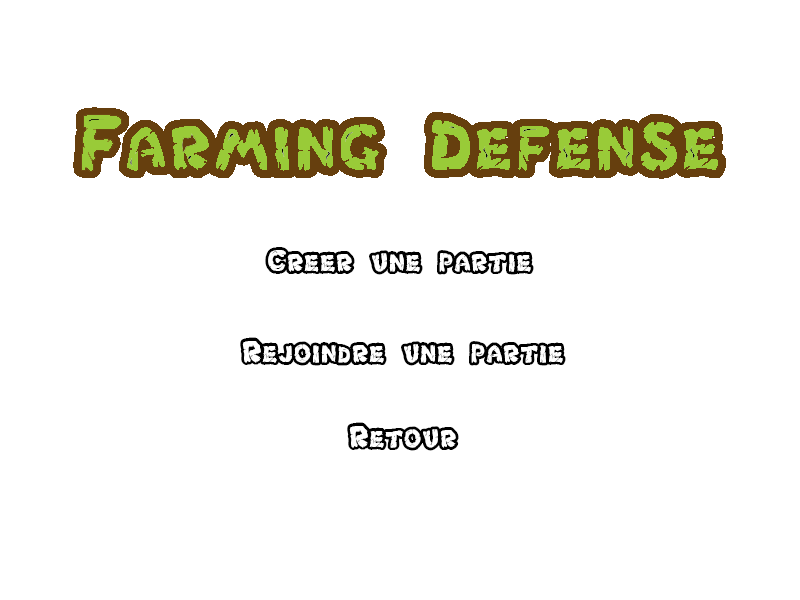
<style>
.page{position:relative;width:800px;height:600px;background:#ffffff}
.page>*{position:absolute;margin:0}
.t1{font:36px "Chlorinar";color:#000000}
</style>
<div class="page">
<p class="t1" style="left:265px;top:247px;width:269px;height:28px">Creer une partie</p>
<p class="t1" style="left:240px;top:337px;width:326px;height:29px">Rejoindre une partie</p>
<p class="t1" style="left:347px;top:422px;width:112px;height:29px">Retour</p>
</div>
